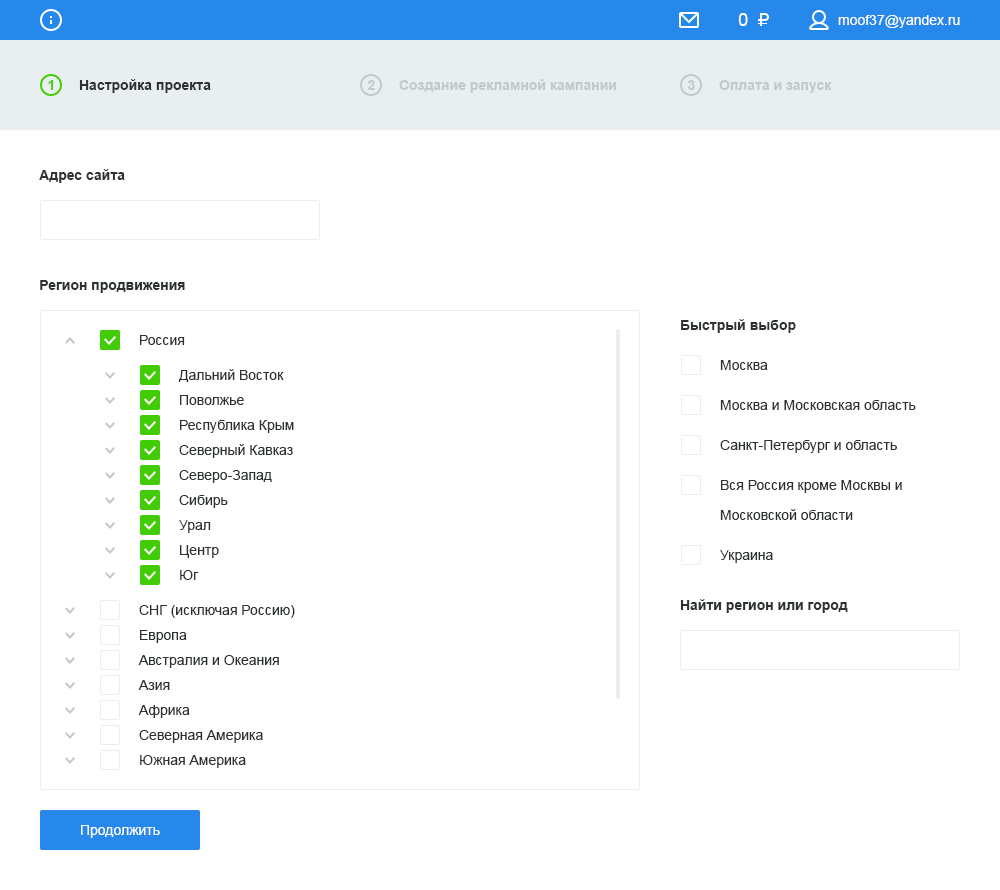
<style>
.page{position:relative;width:1000px;height:890px;background:#ffffff}
.page>*{position:absolute;margin:0}
.t1{font:18px "ArialMT";color:#ffffff}
.t2{font:14px "ArialMT";color:#ffffff}
.t3{font:14px "Arial-BoldMT";color:#45cd0a}
.t4{font:14px "Arial-BoldMT";color:#2c3133}
.t5{font:14px "Arial-BoldMT";color:#c3c8cc}
.t6{font:14px "ArialMT";color:#2c3133}
.t7{font:14px/40px "ArialMT";color:#2c3133}
.t8{font:14px/30px "ArialMT";color:#2c3133}
.t9{font:14px/25px "ArialMT";color:#2c3133}
</style>
<div class="page">
<p class="t1" style="left:738px;top:13px;width:10px;height:13px">0</p>
<p class="t2" style="left:838px;top:15px;width:122px;height:13px">moof37@yandex.ru</p>
<p class="t3" style="left:48px;top:80px;width:6px;height:10px">1</p>
<p class="t4" style="left:79px;top:79px;width:132px;height:14px">Настройка проекта</p>
<p class="t5" style="left:367px;top:80px;width:8px;height:10px">2</p>
<p class="t5" style="left:399px;top:79px;width:218px;height:14px">Создание рекламной кампании</p>
<p class="t5" style="left:688px;top:80px;width:7px;height:10px">3</p>
<p class="t5" style="left:719px;top:80px;width:113px;height:13px">Оплата и запуск</p>
<p class="t4" style="left:39px;top:169px;width:86px;height:14px">Адрес сайта</p>
<p class="t4" style="left:40px;top:280px;width:145px;height:13px">Регион продвижения</p>
<p class="t4" style="left:681px;top:319px;width:115px;height:14px">Быстрый выбор</p>
<p class="t6" style="left:140px;top:335px;width:45px;height:10px">Россия</p>
<p class="t7" style="left:720px;top:360px;width:196px;height:203px">Москва<br>Москва и Московская область<br>Санкт-Петербург и область<br>Вся Россия кроме Москвы и <span class="t8"><br>Московской области<br></span>Украина</p>
<p class="t9" style="left:178px;top:369px;width:116px;height:211px">Дальний Восток  <br>Поволжье<br>Республика Крым<br>Северный Кавказ<br>Северо-Запад<br>Сибирь<br>Урал<br>Центр<br>Юг</p>
<p class="t9" style="left:138px;top:605px;width:157px;height:163px">СНГ (исключая Россию)<br>Европа<br>Австралия и Океания<br>Азия<br>Африка<br>Северная Америка<br>Южная Америка</p>
<p class="t4" style="left:680px;top:599px;width:168px;height:14px">Найти регион или город</p>
<p class="t2" style="left:81px;top:825px;width:79px;height:13px">Продолжить</p>
</div>
